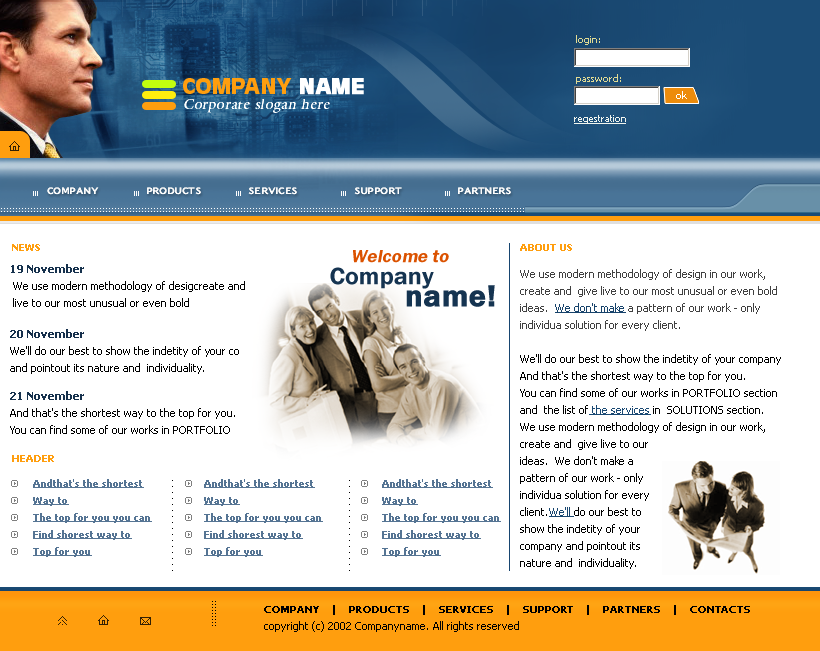
<style>
.page{position:relative;width:820px;height:651px;background:#ffffff}
.page>*{position:absolute;margin:0}
.t1{font:10px "Tahoma";color:#e0da93}
.t2{font:22px "OliverNew-Bold";color:#ff9e0e}
.t3{font:22px "OliverNew-Bold";color:#ffffff;font-weight:bold}
.t4{font:14px "AGGalleon-Roman";letter-spacing:0.05em;color:#ffffff;font-style:italic}
.t5{font:10px "Tahoma";color:#ffffff}
.t6{font:9px "KudrashovSansC";letter-spacing:-0.05em;color:#ffffff}
.t7{font:10px "Tahoma-Bold";color:#ff9e0e}
.t8{font:18px/22px "FranklinGothicDemiC";color:#db5200;font-style:italic}
.t9{font:18px/22px "FranklinGothicDemiC";color:#db5200;text-transform:uppercase;font-style:italic}
.t10{font:24px/22px "FranklinGothicDemiC";color:#153451}
.t11{font:30px/22px "FranklinGothicDemiC";color:#153451;font-weight:bold}
.t12{font:11px/17px "Tahoma";color:#000000}
.t13{font:11px/14px "Tahoma-Bold";color:#16314d}
.t14{font:11px/14px "Tahoma-Bold";color:#152f4b}
.t15{font:11px/17px "Tahoma";color:#404040}
.t16{font:11px/17px "Tahoma";color:#17436b;text-decoration:underline}
.t17{font:11px/17px "Tahoma";color:#194872;text-decoration:underline}
.t18{font:11px/17px "Tahoma";color:#18466f;text-decoration:underline}
.t19{font:10px/17px "Tahoma-Bold";color:#557493;text-decoration:underline}
.t20{font:10px "Tahoma";color:#000000;font-weight:bold}
.t21{font:11px "Tahoma";color:#000000}
.t22{font:11px "Tahoma-Bold";color:#000000}
</style>
<div class="page">
<p class="t1" style="left:576px;top:35px;width:24px;height:10px">login:</p>
<p class="t2" style="left:183px;top:78px;width:181px;height:17px">COMPANY <span class="t3">NAME</span></p>
<p class="t1" style="left:576px;top:74px;width:45px;height:10px">password:</p>
<p class="t4" style="left:184px;top:99px;width:146px;height:14px">Corporate slogan here</p>
<p class="t5" style="left:676px;top:91px;width:11px;height:8px">ok</p>
<p class="t6" style="left:47px;top:187px;width:464px;height:8px">COMPANY                 PRODUCTS                 SERVICES                    SUPPORT                    PARTNERS</p>
<p class="t7" style="left:12px;top:244px;width:28px;height:7px">NEWS</p>
<p class="t7" style="left:520px;top:244px;width:52px;height:7px">ABOUT US</p>
<p class="t8" style="left:330px;top:250px;width:165px;height:57px"><span class="t9">     W</span>elcome to<br><span class="t10">Company <br>                  </span><span class="t11">name!</span></p>
<p class="t12" style="left:10px;top:264px;width:235px;height:170px"><span class="t13">19 November<br> </span>We use modern methodology of desigcreate and  <br> live to our most unusual or even bold <br><br><span class="t14">20 November<br></span>We'll do our best to show the indetity of your co<br>and pointout its nature and  individuality.<br><br><span class="t13">21 November <br></span>And that's the shortest way to the top for you. <br>You can find some of our works in PORTFOLIO</p>
<p class="t12" style="left:520px;top:269px;width:261px;height:300px"><span class="t15">We use modern methodology of design in our work,<br>create and  give live to our most unusual or even bold <br>ideas.  </span><span class="t16">We don't make </span><span class="t15">a pattern of our work - only <br>individua solution for every client.<br><br></span>We'll do our best to show the indetity of your company<br>And that's the shortest way to the top for you. <br>You can find some of our works in PORTFOLIO section<br>and  the list of<span class="t17"> the services</span> in  SOLUTIONS section. <br>We use modern methodology of design in our work,<br>create and  give live to our<br>ideas.  We don't make a<br>pattern of our work - only <br>individua solution for every<br>client.<span class="t18">We'll </span>do our best to<br>show the indetity of your<br>company and pointout its <br>nature and  individuality.</p>
<p class="t7" style="left:12px;top:455px;width:42px;height:7px">HEADER</p>
<p class="t19" style="left:33px;top:479px;width:119px;height:78px">Andthat's the shortest<br>Way to<br>The top for you you can<br>Find shorest way to<br>Top for you</p>
<p class="t19" style="left:204px;top:479px;width:119px;height:78px">Andthat's the shortest<br>Way to<br>The top for you you can<br>Find shorest way to<br>Top for you</p>
<p class="t19" style="left:382px;top:479px;width:119px;height:78px">Andthat's the shortest<br>Way to<br>The top for you you can<br>Find shorest way to<br>Top for you</p>
<p class="t20" style="left:264px;top:605px;width:486px;height:10px">COMPANY   |   PRODUCTS   |   SERVICES   |   SUPPORT   |   PARTNERS   |   CONTACTS</p>
<p class="t21" style="left:264px;top:621px;width:255px;height:11px"><span class="t22">                              </span>copyright (c) 2002 Companyname. All rights reserved</p>
</div>
